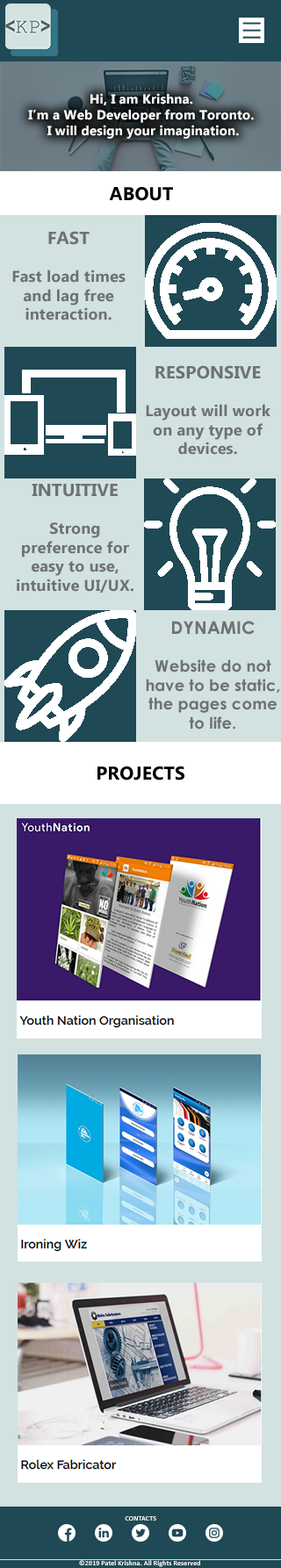
<style>
.page{position:relative;width:281px;height:1568px}
.page>*{position:absolute;margin:0}
.t1{font:13.2px "Ebrima-Bold";letter-spacing:0.01em;color:#fffefe}
.t2{font:18.4px "Ebrima-Bold";letter-spacing:0.01em;color:#090000}
.t3{font:13.2px "Ebrima-Bold";letter-spacing:0.01em;color:#090000}
.t4{font:15.8px "Ebrima-Bold";letter-spacing:0.01em;color:#6e7172}
.t5{font:17.6px "Ebrima-Bold";letter-spacing:0.01em;color:#6e7172}
.t6{font:15.8px "CenturyGothic-Bold";letter-spacing:0.01em;color:#6e7172}
.t7{font:17.6px "CenturyGothic-Bold";letter-spacing:0.01em;color:#6e7172}
.t8{font:7px "Calibri-Bold";letter-spacing:0.01em;color:#fafcfc}
</style>
<div class="page">
<p class="t1" style="left:28px;top:93px;width:226px;height:46px;text-align:center">Hi, I am Krishna. <br>I’m a Web Developer from Toronto. <br>I will design your imagination.</p>
<p class="t2" style="left:109px;top:187px;width:64px;height:14px"><span class="t3">  </span>ABOUT</p>
<p class="t4" style="left:12px;top:231px;width:114px;height:89px;text-align:center"><span class="t5">FAST<br></span><br>Fast load times and lag free interaction.</p>
<p class="t4" style="left:146px;top:365px;width:124px;height:90px;text-align:center"><span class="t5">RESPONSIVE<br></span><br>Layout will work on any type of devices.</p>
<p class="t4" style="left:17px;top:484px;width:116px;height:109px;text-align:center"><span class="t5">INTUITIVE<br></span><br>Strong preference for easy to use, intuitive UI/UX.</p>
<p class="t6" style="left:146px;top:621px;width:134px;height:109px;text-align:center"><span class="t7">DYNAMIC<br></span><br>Website do not have to be static, the pages come to life.</p>
<p class="t8" style="left:125px;top:1516px;width:31px;height:5px">CONTACTS</p>
<p class="t8" style="left:79px;top:1560px;width:121px;height:7px">©2019 Patel Krishna. All Rights Reserved</p>
</div>
